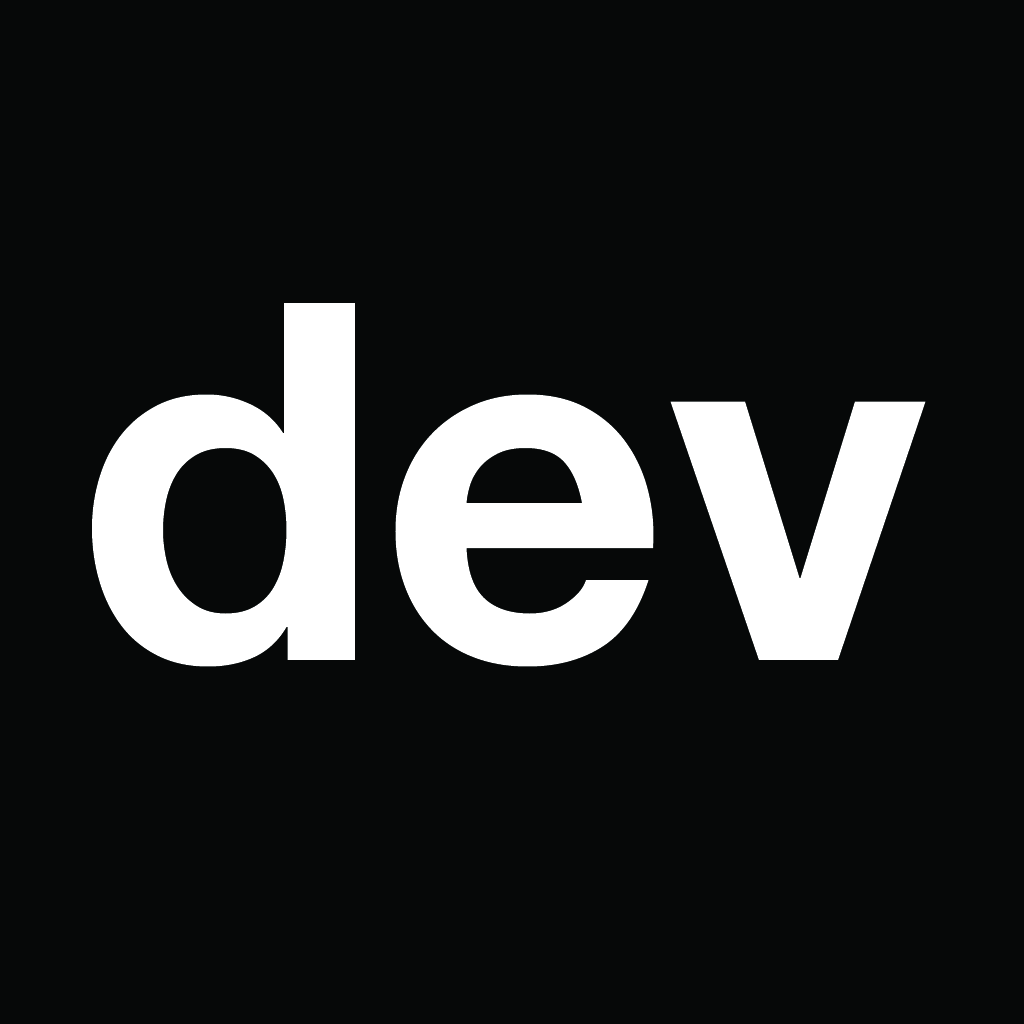
<style>
.page{position:relative;width:1024px;height:1024px;background:#060808}
.page>*{position:absolute;margin:0}
.t1{font:500px "HelveticaNeue-Bold";color:#ffffff}
</style>
<div class="page">
<p class="t1" style="left:92px;top:303px;width:834px;height:364px">dev</p>
</div>
